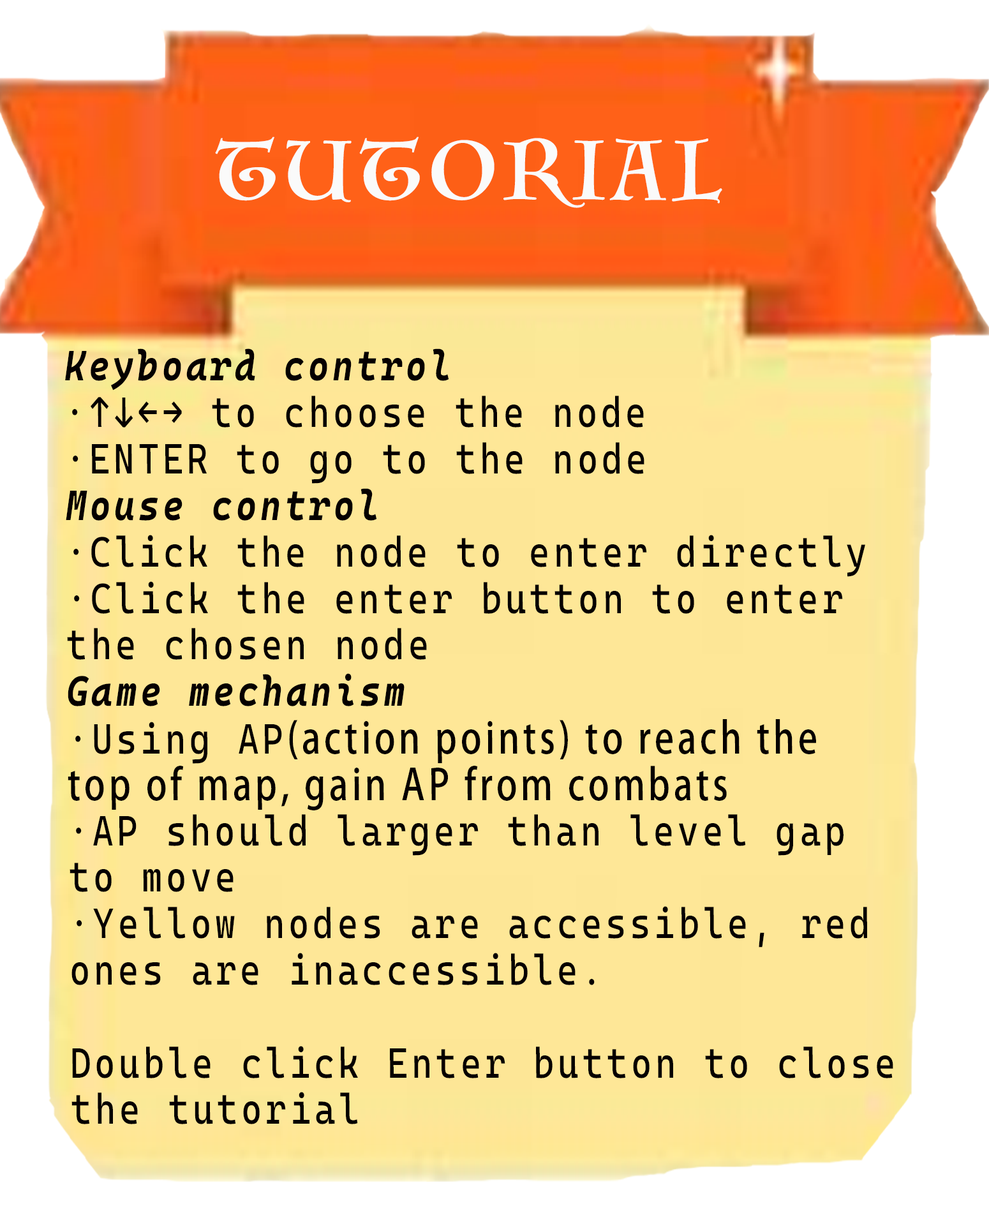
<style>
.page{position:relative;width:989px;height:1206px;background:#fee797}
.page>*{position:absolute;margin:0}
.t1{font:81.1px "Luminari-Regular";letter-spacing:0.1em;color:#fafafa}
.t2{font:42.5px/48.5px "CascadiaCode-Regular";letter-spacing:0.1em;color:#050000;scale:0.84 1}
.t3{font:42.5px/48.5px "CascadiaCodeItalic-BoldItalic";letter-spacing:0.1em;color:#050000;scale:0.84 1}
.t4{font:42.5px/48.5px "AdobeHeitiStd-Regular";letter-spacing:0.1em;color:#050000;scale:0.84 1}
</style>
<div class="page">
<p class="t1" style="left:215px;top:137px;width:507px;height:71px">TUTORIAL</p>
<p class="t2" style="left:65px;top:348px;width:828px;height:776px"><span class="t3">Keyboard control<br></span>·↑↓←→ to choose the node<br>·ENTER to go to the node<br><span class="t3">Mouse control<br></span>·Click the node to enter directly<br>·Click the enter button to enter <br>the chosen node<br><span class="t3">Game mechanism<br></span>·Using AP<span class="t4">(action points) to reach the <br>top of map, gain AP from combats<br></span>·AP should larger than level gap <br>to move <br>·Yellow nodes are accessible, red <br>ones are inaccessible.<br><br>Double click Enter button to close<br>the tutorial</p>
</div>
